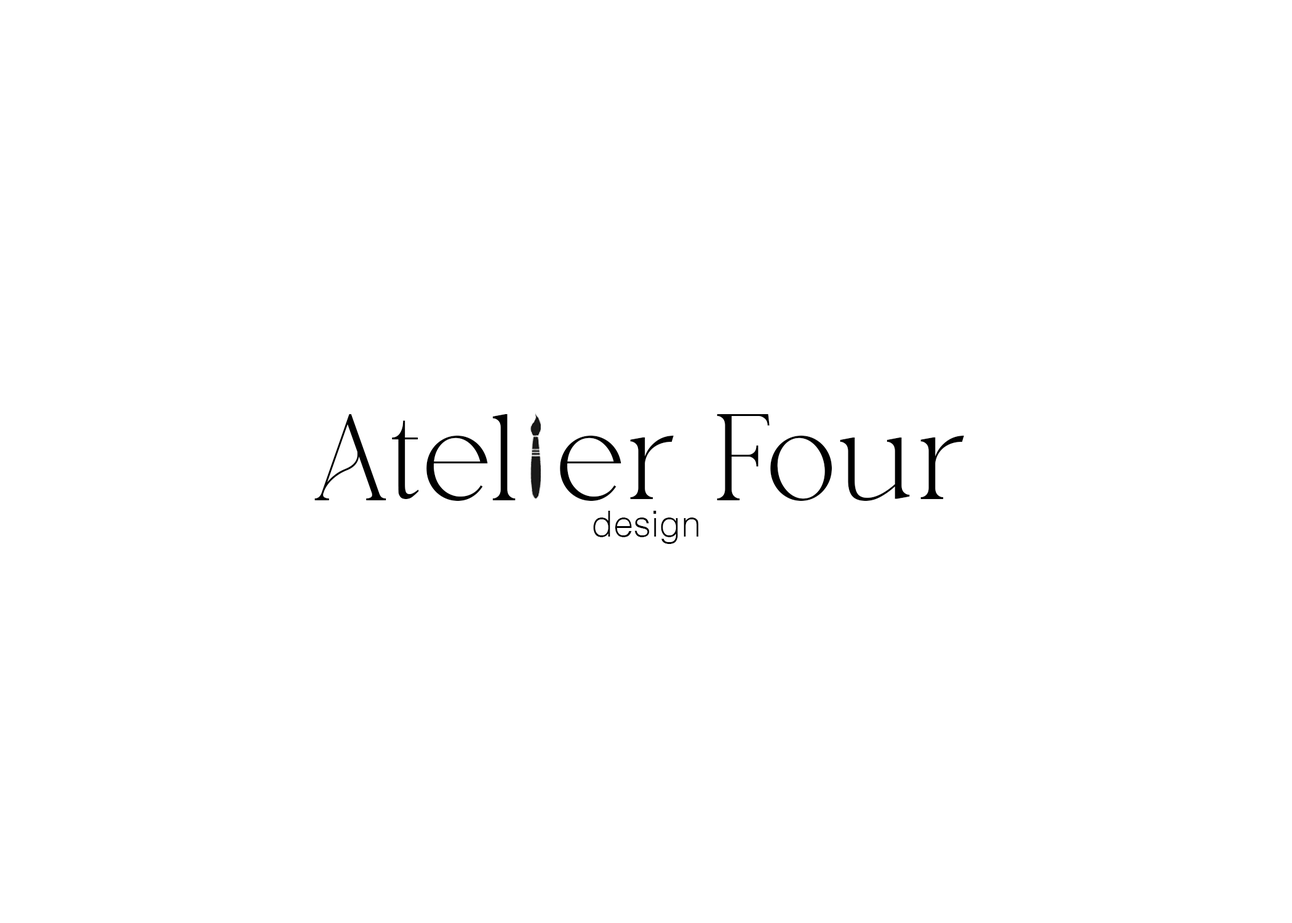
<style>
.page{position:relative;width:1292px;height:923px;background:#ffffff}
.page>*{position:absolute;margin:0}
.t1{font:123.1px "Austen-Free";color:#000000}
.t2{font:35.9px "Helvetica-Light";color:#000000}
</style>
<div class="page">
<p class="t1" style="left:314px;top:414px;width:650px;height:87px">Atelier Four</p>
<p class="t2" style="left:593px;top:511px;width:105px;height:33px">design</p>
</div>
